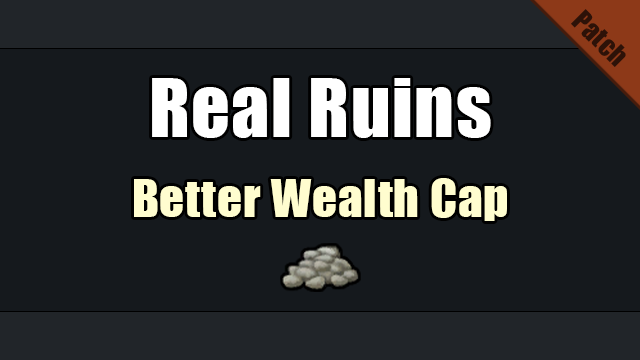
<style>
.page{position:relative;width:640px;height:360px;background:#15191d}
.page>*{position:absolute;margin:0}
.t1{font:26.7px "Impact";letter-spacing:0.02em;color:#2d1208}
.t2{font:48px/80px "Impact";letter-spacing:0.02em;color:#fffdcf}
.t3{font:74.7px/80px "Impact";letter-spacing:0.02em;color:#ffffff}
</style>
<div class="page">
<p class="t1" style="left:571px;top:9px;width:55px;height:58px;rotate:45deg">Patch</p>
<p class="t2" style="left:134px;top:78px;width:373px;height:143px;text-align:center"><span class="t3">Real Ruins<br></span>Better Wealth Cap</p>
</div>
